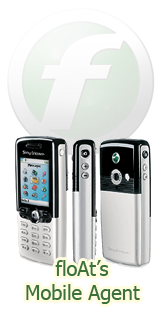
<style>
.page{position:relative;width:164px;height:314px;background:#ffffff}
.page>*{position:absolute;margin:0}
.t1{font:20px "Tahoma";color:#3c713b}
</style>
<div class="page">
<p class="t1" style="left:26px;top:260px;width:114px;height:44px;text-align:center">floAt’s<br>Mobile Agent</p>
</div>
